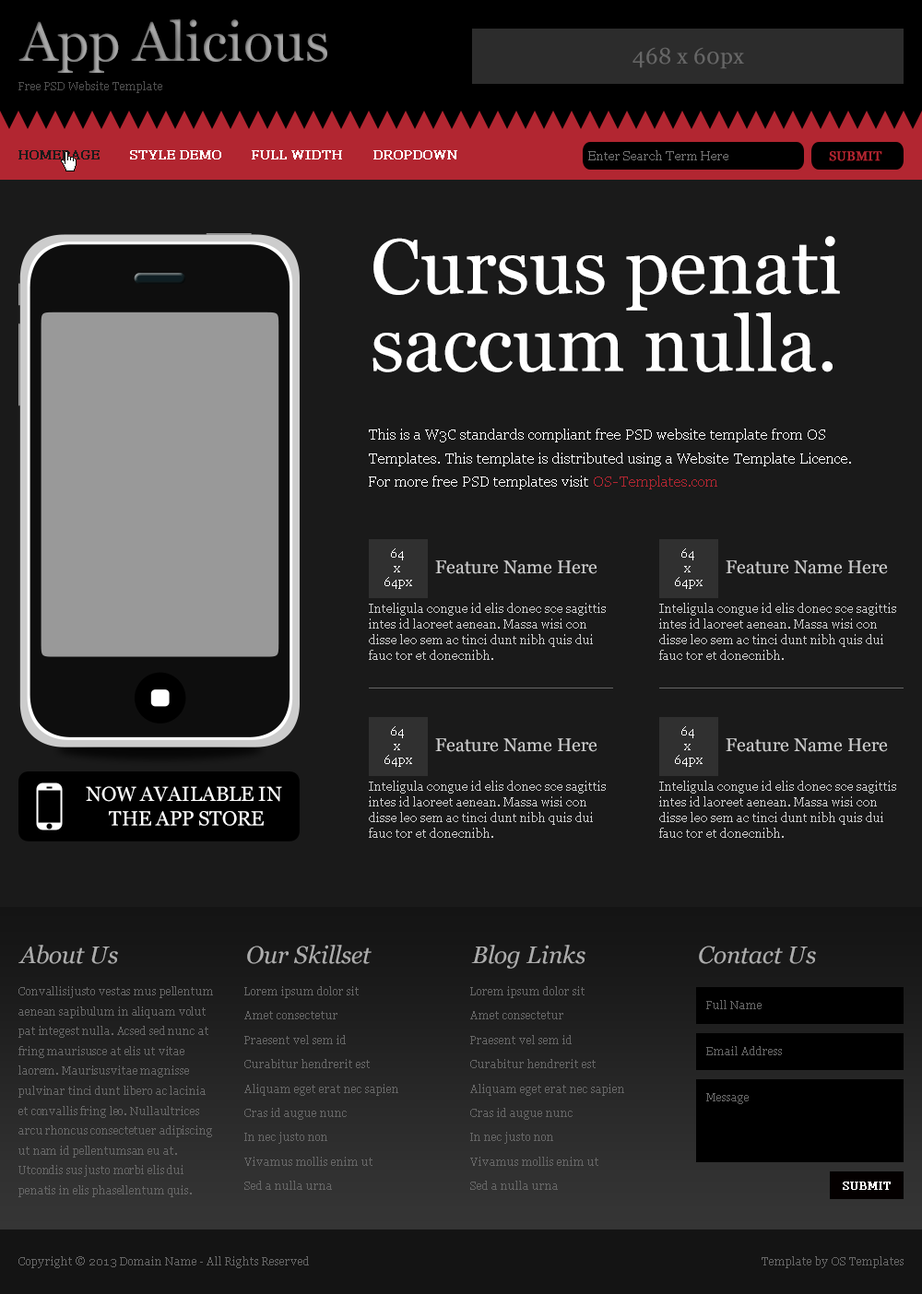
<style>
.page{position:relative;width:922px;height:1294px;background:#1a1a1a}
.page>*{position:absolute;margin:0}
.t1{font:55.3px "Georgia";color:#999999}
.t2{font:22.1px "Georgia";color:#666666}
.t3{font:11.1px "Georgia";color:#4f4f4f}
.t4{font:12.9px "Georgia";color:#1a1a1a;font-weight:bold}
.t5{font:12.9px "Georgia";color:#ffffff;font-weight:bold}
.t6{font:12.9px "Georgia";color:#737373}
.t7{font:12.9px "Georgia";color:#b22631;text-transform:uppercase;font-weight:bold}
.t8{font:77.4px/77.4px "Georgia";color:#ffffff}
.t9{font:14.7px/23.6px "Georgia";color:#ffffff}
.t10{font:14.7px/23.6px "Georgia";color:#b22631}
.t11{font:12px/14.4px "Georgia";color:#ffffff}
.t12{font:18.4px "Georgia";color:#cccccc}
.t13{font:12px/15.6px "Georgia";color:#cccccc}
.t14{font:20.3px/24.3px "Georgia";color:#ffffff}
.t15{font:24px "Georgia-Italic";color:#acacac}
.t16{font:11.1px/19.9px "Georgia";letter-spacing:-0.01em;color:#666666}
.t17{font:11.1px/24.3px "Georgia";color:#666666}
.t18{font:11.1px "Georgia";color:#666666}
.t19{font:11.1px "Georgia";color:#ffffff;font-weight:bold}
</style>
<div class="page">
<p class="t1" style="left:18px;top:18px;width:309px;height:55px">App Alicious</p>
<p class="t2" style="left:632px;top:47px;width:112px;height:22px">468 x 60px</p>
<p class="t3" style="left:18px;top:81px;width:144px;height:12px">Free PSD Website Template</p>
<p class="t4" style="left:18px;top:150px;width:82px;height:9px">HOMEPAGE</p>
<p class="t5" style="left:130px;top:150px;width:91px;height:9px">STYLE DEMO</p>
<p class="t5" style="left:252px;top:150px;width:90px;height:9px">FULL WIDTH</p>
<p class="t5" style="left:373px;top:150px;width:84px;height:9px">DROPDOWN</p>
<p class="t6" style="left:588px;top:150px;width:140px;height:10px">Enter Search Term Here</p>
<p class="t7" style="left:829px;top:151px;width:53px;height:10px">SUBMIT</p>
<p class="t8" style="left:372px;top:236px;width:468px;height:136px">Cursus penati saccum nulla.</p>
<p class="t9" style="left:369px;top:429px;width:482px;height:60px">This is a W3C standards compliant free PSD website template from OS Templates. This template is distributed using a Website Template Licence. For more free PSD templates visit <span class="t10">OS-Templates.com</span></p>
<p class="t11" style="left:384px;top:548px;width:28px;height:41px;text-align:center">64 <br>x <br>64px</p>
<p class="t11" style="left:675px;top:548px;width:27px;height:41px;text-align:center">64 <br>x <br>64px</p>
<p class="t12" style="left:435px;top:560px;width:162px;height:14px">Feature Name Here</p>
<p class="t12" style="left:725px;top:560px;width:162px;height:14px">Feature Name Here</p>
<p class="t13" style="left:369px;top:603px;width:236px;height:57px">Inteligula congue id elis donec sce sagittis intes id laoreet aenean. Massa wisi con disse leo sem ac tinci dunt nibh quis dui fauc tor et donecnibh.</p>
<p class="t13" style="left:659px;top:603px;width:237px;height:57px">Inteligula congue id elis donec sce sagittis intes id laoreet aenean. Massa wisi con disse leo sem ac tinci dunt nibh quis dui fauc tor et donecnibh.</p>
<p class="t11" style="left:384px;top:726px;width:28px;height:41px;text-align:center">64 <br>x <br>64px</p>
<p class="t11" style="left:675px;top:726px;width:27px;height:41px;text-align:center">64 <br>x <br>64px</p>
<p class="t12" style="left:435px;top:738px;width:162px;height:14px">Feature Name Here</p>
<p class="t12" style="left:725px;top:738px;width:162px;height:14px">Feature Name Here</p>
<p class="t13" style="left:369px;top:781px;width:236px;height:57px">Inteligula congue id elis donec sce sagittis intes id laoreet aenean. Massa wisi con disse leo sem ac tinci dunt nibh quis dui fauc tor et donecnibh.</p>
<p class="t13" style="left:659px;top:781px;width:237px;height:57px">Inteligula congue id elis donec sce sagittis intes id laoreet aenean. Massa wisi con disse leo sem ac tinci dunt nibh quis dui fauc tor et donecnibh.</p>
<p class="t14" style="left:86px;top:786px;width:196px;height:40px;text-align:center">NOW AVAILABLE IN <br>THE APP STORE</p>
<p class="t15" style="left:18px;top:945px;width:100px;height:19px">About Us</p>
<p class="t15" style="left:247px;top:945px;width:124px;height:19px">Our Skillset</p>
<p class="t15" style="left:471px;top:945px;width:114px;height:24px">Blog Links</p>
<p class="t15" style="left:699px;top:946px;width:117px;height:18px">Contact Us</p>
<p class="t16" style="left:18px;top:986px;width:195px;height:211px">Convallisijusto vestas mus pellentum <br>aenean sapibulum in aliquam volut <br>pat integest nulla. Acsed sed nunc at <br>fring maurisusce at elis ut vitae <br>laorem. Maurisusvitae magnisse <br>pulvinar tinci dunt libero ac lacinia <br>et convallis fring leo. Nullaultrices <br>arcu rhoncus consectetuer adipiscing <br>ut nam id pellentumsan eu at. <br>Utcondis sus justo morbi elis dui <br>penatis in elis phasellentum quis.</p>
<p class="t17" style="left:244px;top:986px;width:154px;height:204px;text-align:justify">Lorem ipsum dolor sit<br>Amet consectetur<br>Praesent vel sem id<br>Curabitur hendrerit est<br>Aliquam eget erat nec sapien<br>Cras id augue nunc<br>In nec justo non<br>Vivamus mollis enim ut<br>Sed a nulla urna</p>
<p class="t17" style="left:470px;top:986px;width:154px;height:204px;text-align:justify">Lorem ipsum dolor sit<br>Amet consectetur<br>Praesent vel sem id<br>Curabitur hendrerit est<br>Aliquam eget erat nec sapien<br>Cras id augue nunc<br>In nec justo non<br>Vivamus mollis enim ut<br>Sed a nulla urna</p>
<p class="t18" style="left:706px;top:1000px;width:55px;height:9px">Full Name</p>
<p class="t18" style="left:706px;top:1046px;width:76px;height:9px">Email Address</p>
<p class="t18" style="left:706px;top:1046px;width:76px;height:9px">Email Address</p>
<p class="t18" style="left:706px;top:1093px;width:42px;height:11px">Message</p>
<p class="t19" style="left:842px;top:1181px;width:48px;height:9px">SUBMIT</p>
<p class="t18" style="left:18px;top:1256px;width:291px;height:12px">Copyright © 2013 Domain Name - All Rights Reserved</p>
<p class="t18" style="left:761px;top:1256px;width:142px;height:12px">Template by OS Templates</p>
</div>
